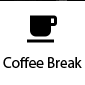
<style>
.page{position:relative;width:85px;height:85px;background:#ffffff}
.page>*{position:absolute;margin:0}
.t1{font:15px "MyriadPro-Regular"}
</style>
<div class="page">
<p class="t1" style="left:3px;top:56px;width:79px;height:11px">Coffee Break</p>
</div>
